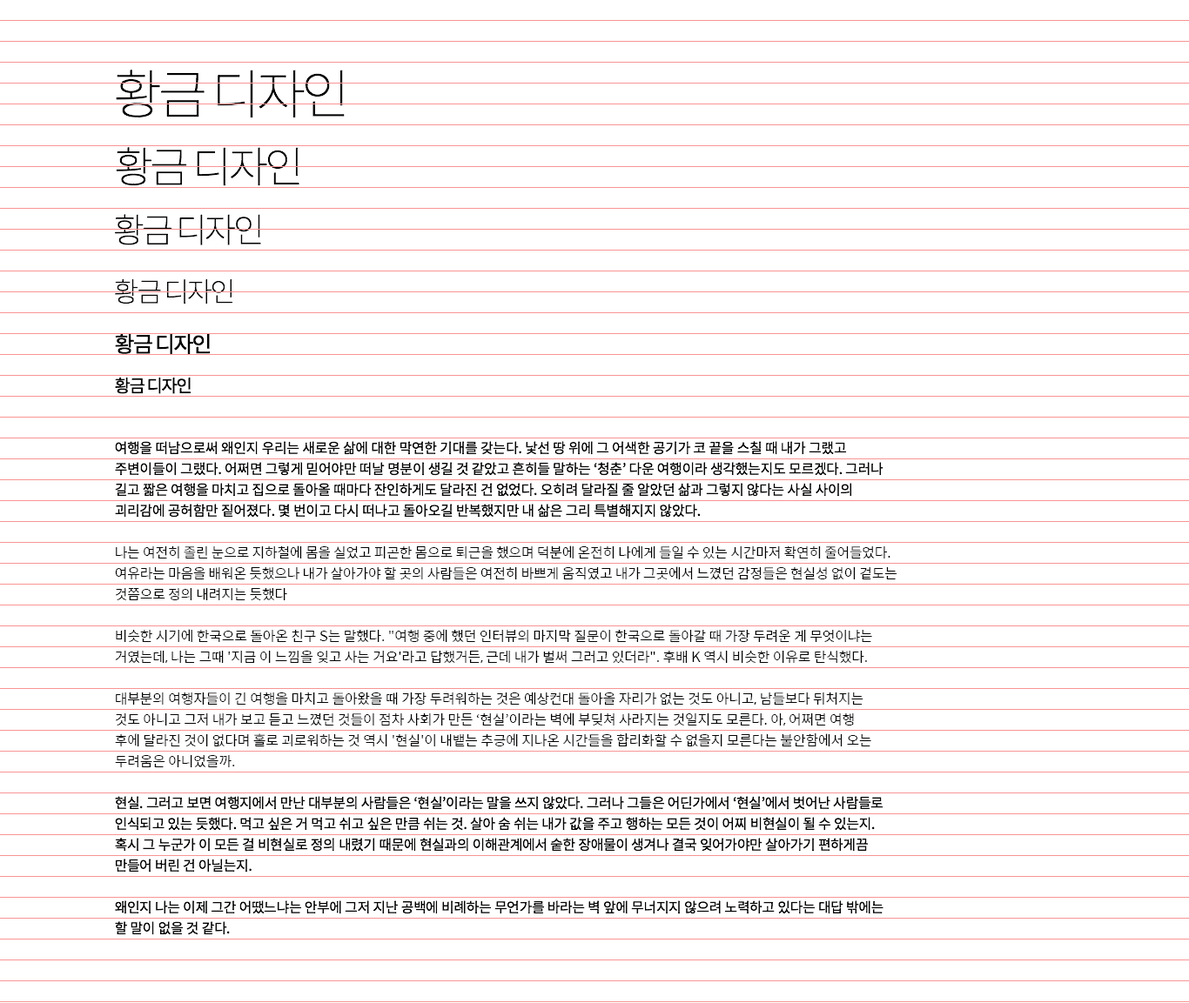
<style>
.page{position:relative;width:1189px;height:1003px;background:#ffffff}
.page>*{position:absolute;margin:0}
.t1{font:53.1px "SpoqaHanSans-Thin";letter-spacing:-0.07em;color:#000000}
.t2{font:42.5px "SpoqaHanSans-Thin";letter-spacing:-0.07em;color:#000000}
.t3{font:34px "SpoqaHanSans-Thin";letter-spacing:-0.07em;color:#000000}
.t4{font:27.2px "SpoqaHanSans-Thin";letter-spacing:-0.07em;color:#000000}
.t5{font:21.8px "SpoqaHanSans-Regular";letter-spacing:-0.07em;color:#000000}
.t6{font:17.4px "SpoqaHanSans-Regular";letter-spacing:-0.07em;color:#000000}
.t7{font:13.9px "SpoqaHanSans-Regular";letter-spacing:-0.015em;color:#010101}
</style>
<div class="page">
<p class="t1" style="left:116px;top:70px;width:229px;height:48px">황금 디자인</p>
<p class="t2" style="left:116px;top:147px;width:183px;height:39px">황금 디자인</p>
<p class="t3" style="left:115px;top:214px;width:146px;height:31px">황금 디자인</p>
<p class="t4" style="left:115px;top:278px;width:117px;height:27px">황금 디자인</p>
<p class="t5" style="left:115px;top:333px;width:96px;height:21px">황금 디자인</p>
<p class="t6" style="left:115px;top:377px;width:76px;height:17px">황금 디자인</p>
<p class="t7" style="left:115px;top:441px;width:782px;height:494px">여행을 떠남으로써 왜인지 우리는 새로운 삶에 대한 막연한 기대를 갖는다. 낯선 땅 위에 그 어색한 공기가 코 끝을 스칠 때 내가 그랬고 주변이들이 그랬다. 어쩌면 그렇게 믿어야만 떠날 명분이 생길 것 같았고 흔히들 말하는 ‘청춘’ 다운 여행이라 생각했는지도 모르겠다. 그러나 길고 짧은 여행을 마치고 집으로 돌아올 때마다 잔인하게도 달라진 건 없었다. 오히려 달라질 줄 알았던 삶과 그렇지 않다는 사실 사이의 괴리감에 공허함만 짙어졌다. 몇 번이고 다시 떠나고 돌아오길 반복했지만 내 삶은 그리 특별해지지 않았다.<br>나는 여전히 졸린 눈으로 지하철에 몸을 실었고 피곤한 몸으로 퇴근을 했으며 덕분에 온전히 나에게 들일 수 있는 시간마저 확연히 줄어들었다. 여유라는 마음을 배워온 듯했으나 내가 살아가야 할 곳의 사람들은 여전히 바쁘게 움직였고 내가 그곳에서 느꼈던 감정들은 현실성 없이 겉도는 것쯤으로 정의 내려지는 듯했다<br>비슷한 시기에 한국으로 돌아온 친구 S는 말했다. "여행 중에 했던 인터뷰의 마지막 질문이 한국으로 돌아갈 때 가장 두려운 게 무엇이냐는 거였는데, 나는 그때 '지금 이 느낌을 잊고 사는 거요'라고 답했거든, 근데 내가 벌써 그러고 있더라". 후배 K 역시 비슷한 이유로 탄식했다.<br>대부분의 여행자들이 긴 여행을 마치고 돌아왔을 때 가장 두려워하는 것은 예상컨대 돌아올 자리가 없는 것도 아니고, 남들보다 뒤처지는 것도 아니고 그저 내가 보고 듣고 느꼈던 것들이 점차 사회가 만든 ‘현실’이라는 벽에 부딪쳐 사라지는 것일지도 모른다. 아, 어쩌면 여행 후에 달라진 것이 없다며 홀로 괴로워하는 것 역시 '현실'이 내뱉는 추긍에 지나온 시간들을 합리화할 수 없을지 모른다는 불안함에서 오는 두려움은 아니었을까.<br>현실. 그러고 보면 여행지에서 만난 대부분의 사람들은 ‘현실’이라는 말을 쓰지 않았다. 그러나 그들은 어딘가에서 ‘현실’에서 벗어난 사람들로 인식되고 있는 듯했다. 먹고 싶은 거 먹고 쉬고 싶은 만큼 쉬는 것. 살아 숨 쉬는 내가 값을 주고 행하는 모든 것이 어찌 비현실이 될 수 있는지. 혹시 그 누군가 이 모든 걸 비현실로 정의 내렸기 때문에 현실과의 이해관계에서 숱한 장애물이 생겨나 결국 잊어가야만 살아가기 편하게끔 만들어 버린 건 아닐는지.<br>왜인지 나는 이제 그간 어땠느냐는 안부에 그저 지난 공백에 비례하는 무언가를 바라는 벽 앞에 무너지지 않으려 노력하고 있다는 대답 밖에는 할 말이 없을 것 같다.</p>
</div>
